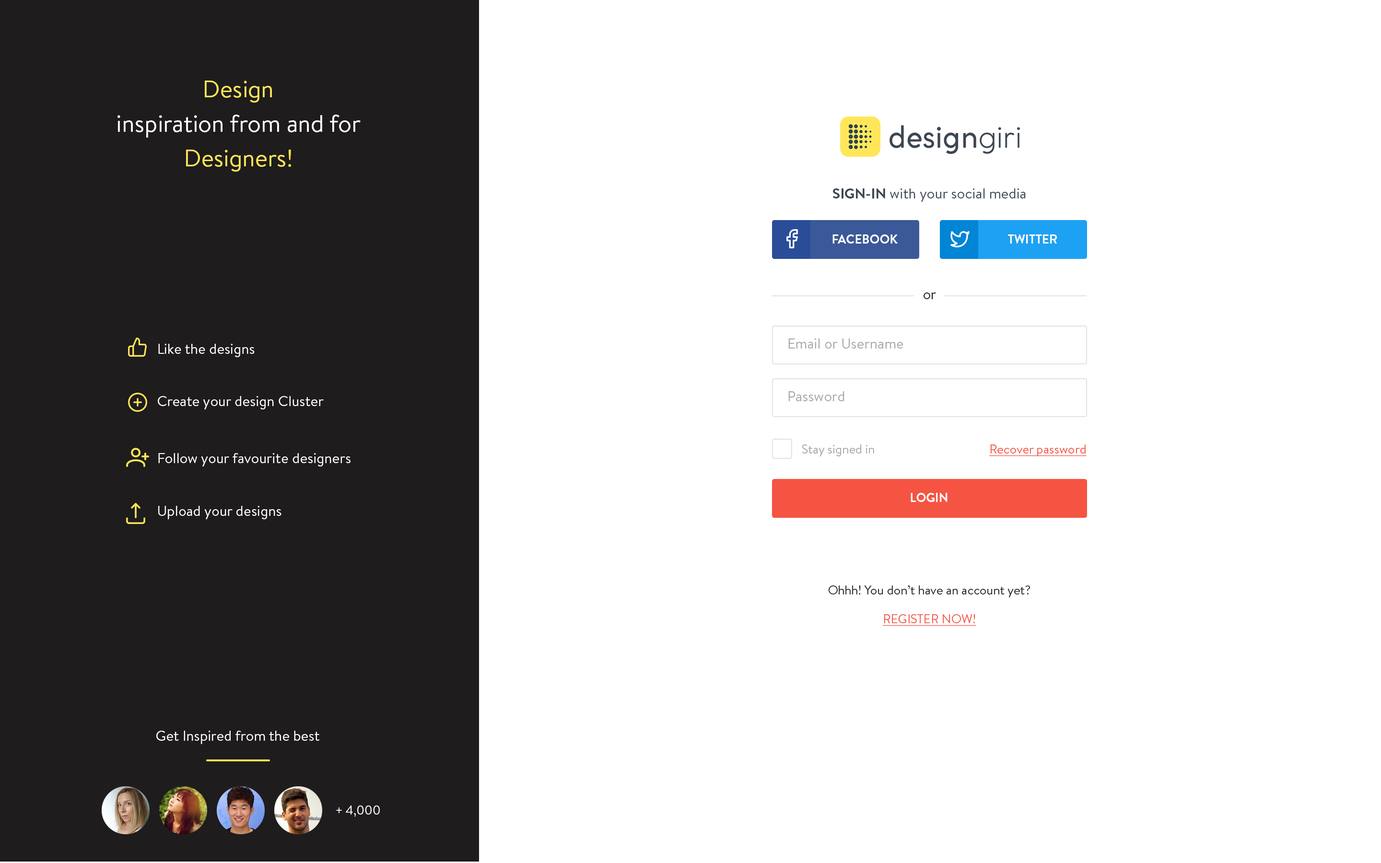
<style>
.page{position:relative;width:1381px;height:863px;background:#ffffff}
.page>*{position:absolute;margin:0}
.t1{font:24px/34.5px "BrandonText-Regular";color:#ffffff}
.t2{font:24px/34.5px "BrandonText-Regular";color:#ffe659}
.t3{font:14.4px "BrandonText-Regular";color:#3c4651}
.t4{font:14.4px "BrandonText-Bold";color:#3c4651}
.t5{font:12.5px "BrandonText-Bold";color:#ffffff;text-transform:uppercase}
.t6{font:14.4px "BrandonText-Regular";color:#1e1c1c}
.t7{font:14.4px "BrandonText-Regular";color:#a8a7a7}
.t8{font:14.4px "BrandonText-Regular";color:#ffffff}
.t9{font:12.5px "BrandonText-Regular";color:#a8a7a7}
.t10{font:12.5px "BrandonText-Regular";color:#f55443;text-decoration:underline}
.t11{font:12.5px "BrandonText-Regular";color:#1e1c1c}
.t12{font:12.5px "BrandonText-Regular";color:#f55443;text-transform:uppercase;text-decoration:underline}
.t13{font:12.5px "BrandonText-Regular";color:#ffffff}
</style>
<div class="page">
<p class="t1" style="left:118px;top:81px;width:243px;height:91px;text-align:center"><span class="t2">Design<br></span>inspiration from and for<br><span class="t2">Designers!</span></p>
<p class="t3" style="left:833px;top:188px;width:193px;height:14px"><span class="t4">SIGN-IN</span> with your social media</p>
<p class="t5" style="left:833px;top:235px;width:65px;height:9px">Facebook</p>
<p class="t5" style="left:1008px;top:235px;width:49px;height:9px">Twitter</p>
<p class="t6" style="left:924px;top:293px;width:12px;height:6px">or</p>
<p class="t7" style="left:788px;top:339px;width:116px;height:10px">Email or Username</p>
<p class="t8" style="left:158px;top:344px;width:97px;height:13px">Like the designs</p>
<p class="t8" style="left:158px;top:396px;width:166px;height:14px">Create your design Cluster</p>
<p class="t7" style="left:788px;top:391px;width:57px;height:10px">Password</p>
<p class="t9" style="left:802px;top:445px;width:72px;height:12px">Stay signed in</p>
<p class="t10" style="left:989px;top:445px;width:98px;height:12px">Recover password</p>
<p class="t8" style="left:158px;top:453px;width:193px;height:14px">Follow your favourite designers</p>
<p class="t5" style="left:911px;top:493px;width:37px;height:9px">Login</p>
<p class="t8" style="left:158px;top:506px;width:124px;height:13px">Upload your designs</p>
<p class="t11" style="left:828px;top:586px;width:203px;height:12px">Ohhh! You don’t have an account yet?</p>
<p class="t12" style="left:883px;top:614px;width:93px;height:12px">Register Now!</p>
<p class="t8" style="left:156px;top:731px;width:164px;height:13px">Get Inspired from the best</p>
<p class="t13" style="left:336px;top:806px;width:44px;height:11px">+ 4,000</p>
</div>
